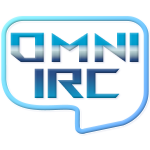
<style>
.page{position:relative;width:150px;height:150px;background:#ffffff}
.page>*{position:absolute;margin:0}
.t1{font:41.7px "AniMeVisionMB_EN"}
</style>
<div class="page">
<p class="t1" style="left:10px;top:32px;width:129px;height:30px">OMNI</p>
<p class="t1" style="left:34px;top:68px;width:86px;height:30px">IRC</p>
</div>
